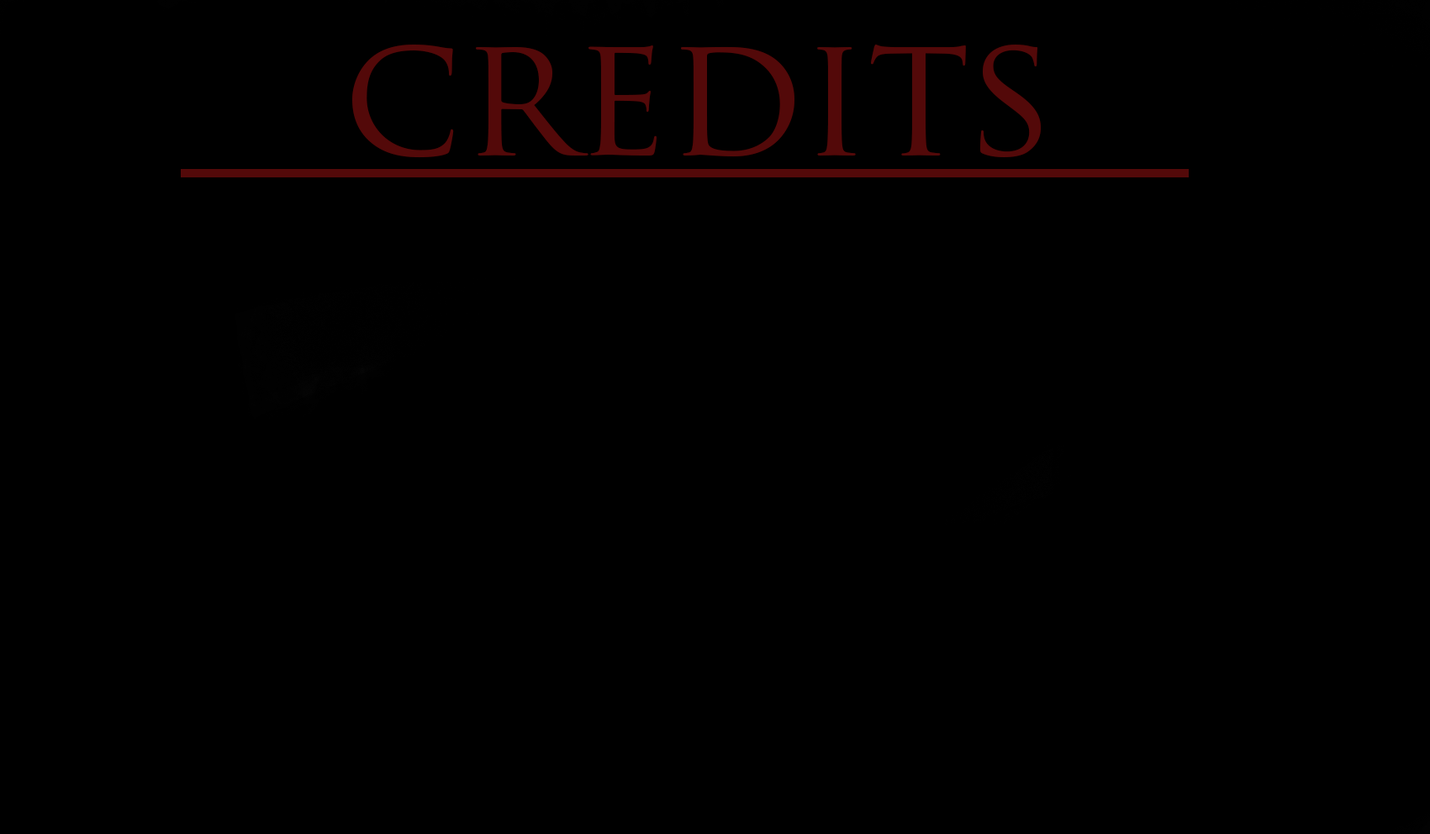
<style>
.page{position:relative;width:1430px;height:834px;background:#000000}
.page>*{position:absolute;margin:0}
.t1{font:168.1px "TrajanPro-Regular";color:#530909}
</style>
<div class="page">
<p class="t1" style="left:352px;top:45px;width:689px;height:113px">credits</p>
</div>
